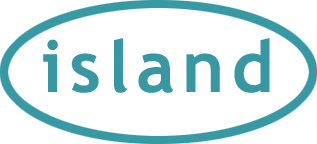
<style>
.page{position:relative;width:317px;height:144px;background:#ffffff}
.page>*{position:absolute;margin:0}
.t1{font:72px "TrebuchetMS-Bold";letter-spacing:0.1em;color:#3798a4}
</style>
<div class="page">
<p class="t1" style="left:43px;top:38px;width:227px;height:55px">island</p>
</div>
